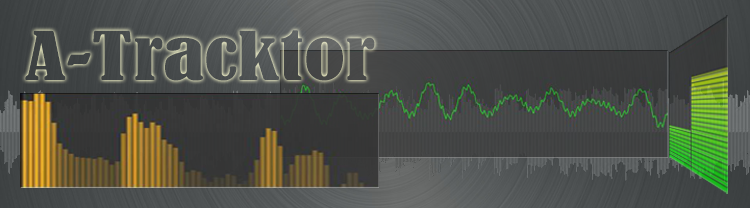
<style>
.page{position:relative;width:750px;height:208px}
.page>*{position:absolute;margin:0}
.t1{font:62.4px "BernardMT-Condensed";color:#46494a;scale:1.38 1}
</style>
<div class="page">
<p class="t1" style="left:25px;top:30px;width:350px;height:51px">A-Tracktor</p>
</div>
